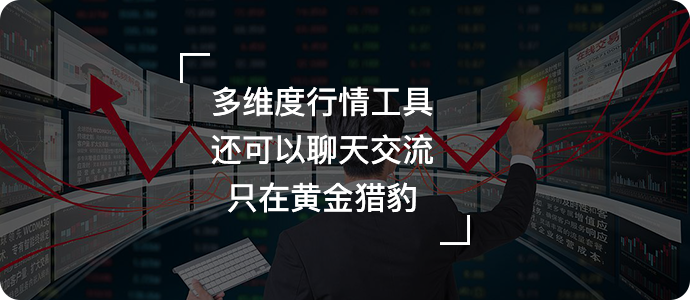
<style>
.page{position:relative;width:690px;height:300px}
.page>*{position:absolute;margin:0}
.t1{font:32px/48.4px "PingFang-SC-Bold";color:#ffffff}
</style>
<div class="page">
<p class="t1" style="left:211px;top:86px;width:222px;height:127px;text-align:center">多维度行情工具<br>还可以聊天交流<br>只在黄金猎豹</p>
</div>
